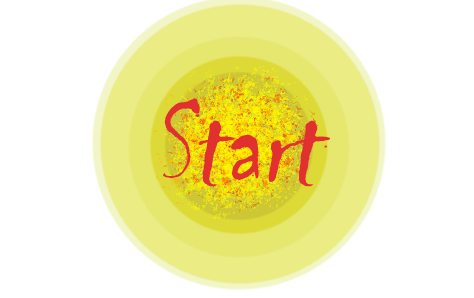
<style>
.page{position:relative;width:474px;height:298px;background:#ffffff}
.page>*{position:absolute;margin:0}
.t1{font:134.7px "Chiller-Regular";color:#e13030;font-style:italic;scale:0.87 1}
</style>
<div class="page">
<p class="t1" style="left:163px;top:98px;width:167px;height:89px">Start</p>
</div>
